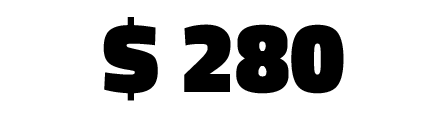
<style>
.page{position:relative;width:447px;height:118px;background:#ffffff}
.page>*{position:absolute;margin:0}
.t1{font:100px "TitilliumWeb-Black";color:#000000}
</style>
<div class="page">
<p class="t1" style="left:103px;top:17px;width:241px;height:84px">$ 280</p>
</div>
